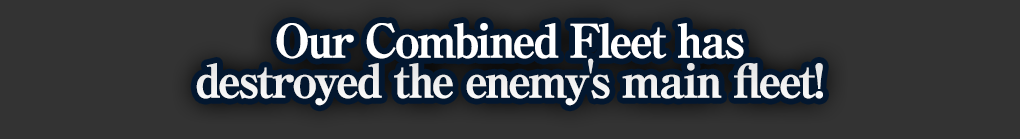
<style>
.page{position:relative;width:1020px;height:139px;background:#333333}
.page>*{position:absolute;margin:0}
.t1{font:46px/40px "RyuminPro-ExBold";letter-spacing:-0.08em;color:#ffffff;font-weight:bold}
</style>
<div class="page">
<p class="t1" style="left:196px;top:23px;width:627px;height:83px;text-align:center">Our Combined Fleet has<br>destroyed the enemy's main fleet!</p>
</div>
